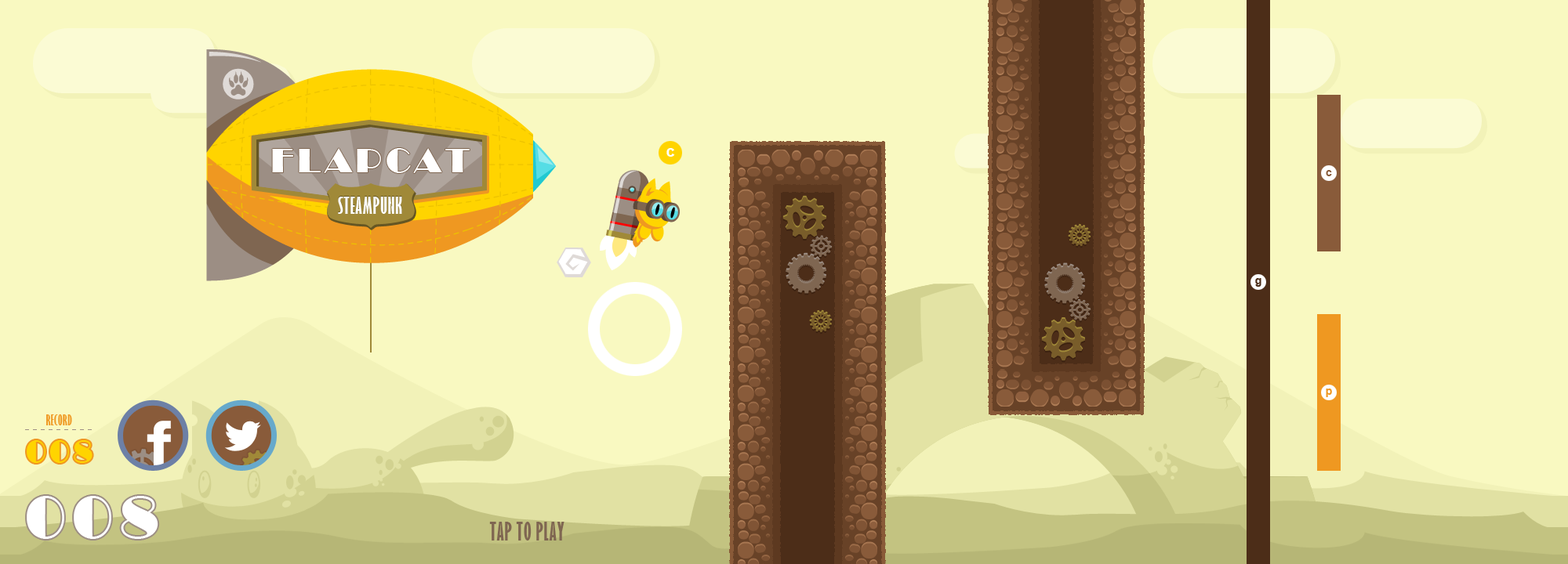
<style>
.page{position:relative;width:1568px;height:564px;background:#f9f9c1}
.page>*{position:absolute;margin:0}
.t1{font:35.3px "Broadway";letter-spacing:0.1em;color:#ffffff;text-transform:uppercase}
.t2{font:15.7px "Arial-BoldMT";color:#ffffff}
.t3{font:11px "Arial-BoldMT";color:#895b3a}
.t4{font:22px "GillSansMT-ExtraCondensedBold";letter-spacing:0.02em;color:#ffffff;text-transform:uppercase}
.t5{font:11px "Arial-BoldMT";color:#4c2d18}
.t6{font:11px "Arial-BoldMT";color:#ef9821}
.t7{font:13.3px "GillSansMT-ExtraCondensedBold";letter-spacing:0.03em;color:#ef9821;text-transform:uppercase}
.t8{font:31.4px "Broadway";letter-spacing:0.1em;color:#ffd400;text-transform:uppercase}
.t9{font:62.7px "Broadway";letter-spacing:0.1em;color:#ffffff;text-transform:uppercase}
.t10{font:23.5px "GillSansMT-ExtraCondensedBold";letter-spacing:0.02em;color:#7f6651;text-transform:uppercase}
</style>
<div class="page">
<p class="t1" style="left:272px;top:148px;width:198px;height:25px">flapcat</p>
<p class="t2" style="left:666px;top:148px;width:9px;height:9px">c</p>
<p class="t3" style="left:1326px;top:170px;width:6px;height:6px">c</p>
<p class="t4" style="left:338px;top:197px;width:64px;height:17px">steampunk</p>
<p class="t5" style="left:1255px;top:278px;width:6px;height:9px">g</p>
<p class="t6" style="left:1326px;top:389px;width:6px;height:8px">p</p>
<p class="t7" style="left:46px;top:415px;width:26px;height:11px">record</p>
<p class="t8" style="left:27px;top:441px;width:66px;height:22px">008</p>
<p class="t9" style="left:27px;top:496px;width:131px;height:43px">008</p>
<p class="t10" style="left:489px;top:522px;width:75px;height:19px">tap to play</p>
</div>
